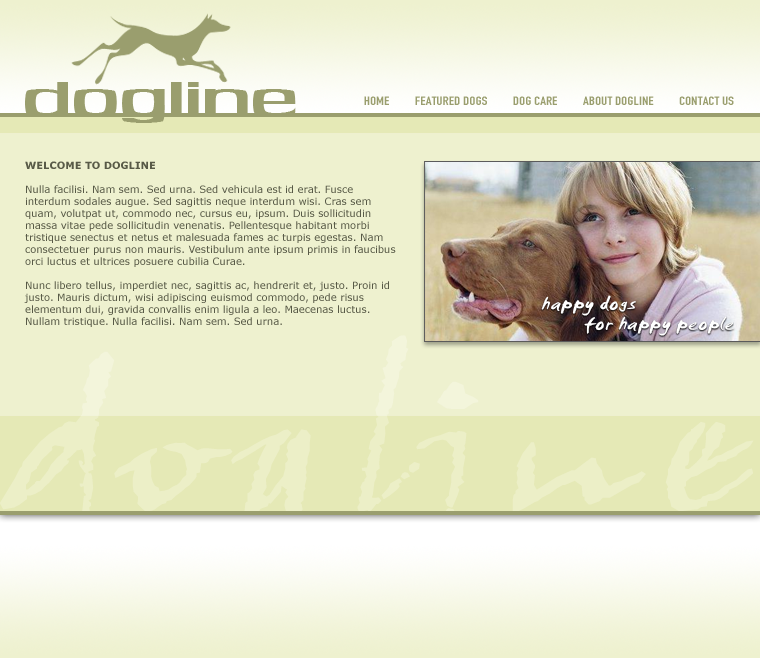
<style>
.page{position:relative;width:760px;height:658px;background:#eef1cf}
.page>*{position:absolute;margin:0}
.t1{font:40.8px "SoftHits";letter-spacing:0.015em;color:#9a9e6e;scale:1.18 1}
.t2{font:11.9px "DINEngschrift";letter-spacing:0.015em;color:#9a9e6e;scale:1.18 1}
.t3{font:10px/12px "Verdana";color:#585a47}
.t4{font:10px/12px "Verdana-Bold";color:#585a47}
.t5{font:20.4px/20px "SmudgerLetPlain";letter-spacing:0.015em;color:#ffffff;scale:1.18 1}
</style>
<div class="page">
<p class="t1" style="left:25px;top:82px;width:271px;height:41px">dogline</p>
<p class="t2" style="left:364px;top:96px;width:370px;height:9px">HOME         FEATURED DOGS         DOG CARE         ABOUT DOGLINE         CONTACT US</p>
<p class="t3" style="left:24px;top:161px;width:372px;height:166px"><span class="t4">WELCOME TO DOGLINE<br></span><br>Nulla facilisi. Nam sem. Sed urna. Sed vehicula est id erat. Fusce interdum sodales augue. Sed sagittis neque interdum wisi. Cras sem quam, volutpat ut, commodo nec, cursus eu, ipsum. Duis sollicitudin massa vitae pede sollicitudin venenatis. Pellentesque habitant morbi tristique senectus et netus et malesuada fames ac turpis egestas. Nam consectetuer purus non mauris. Vestibulum ante ipsum primis in faucibus orci luctus et ultrices posuere cubilia Curae.<br><br>Nunc libero tellus, imperdiet nec, sagittis ac, hendrerit et, justo. Proin id justo. Mauris dictum, wisi adipiscing euismod commodo, pede risus elementum dui, gravida convallis enim ligula a leo. Maecenas luctus. Nullam tristique. Nulla facilisi. Nam sem. Sed urna.</p>
<p class="t5" style="left:541px;top:295px;width:193px;height:41px;text-align:right">happy dogs                   <br>for happy people</p>
</div>
